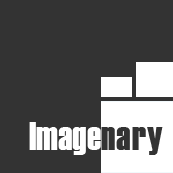
<style>
.page{position:relative;width:173px;height:173px;background:#333333}
.page>*{position:absolute;margin:0}
.t1{font:40px "Haettenschweiler";color:#ffffff}
</style>
<div class="page">
<p class="t1" style="left:29px;top:122px;width:72px;height:33px">Image</p>
</div>
